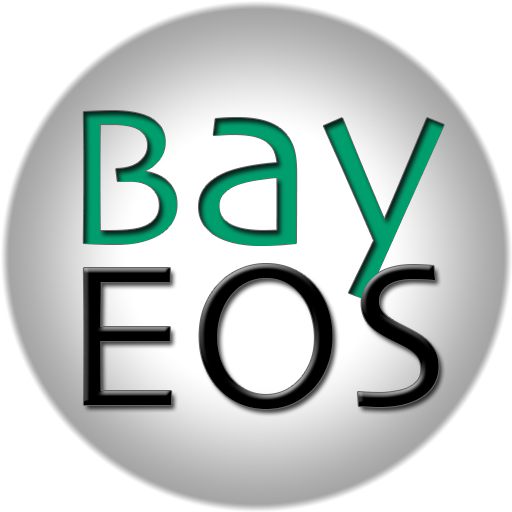
<style>
.page{position:relative;width:512px;height:512px;background:#ffffff}
.page>*{position:absolute;margin:0}
.t1{font:250px "Skia-Regular";color:#009d6d}
.t2{font:200px "Skia-Regular";color:#009d6d}
.t3{font:210px "Skia-Regular";color:#000000}
</style>
<div class="page">
<p class="t1" style="left:83px;top:111px;width:361px;height:188px"><span class="t2">B</span>ay</p>
<p class="t3" style="left:83px;top:264px;width:356px;height:145px">EOS</p>
</div>
